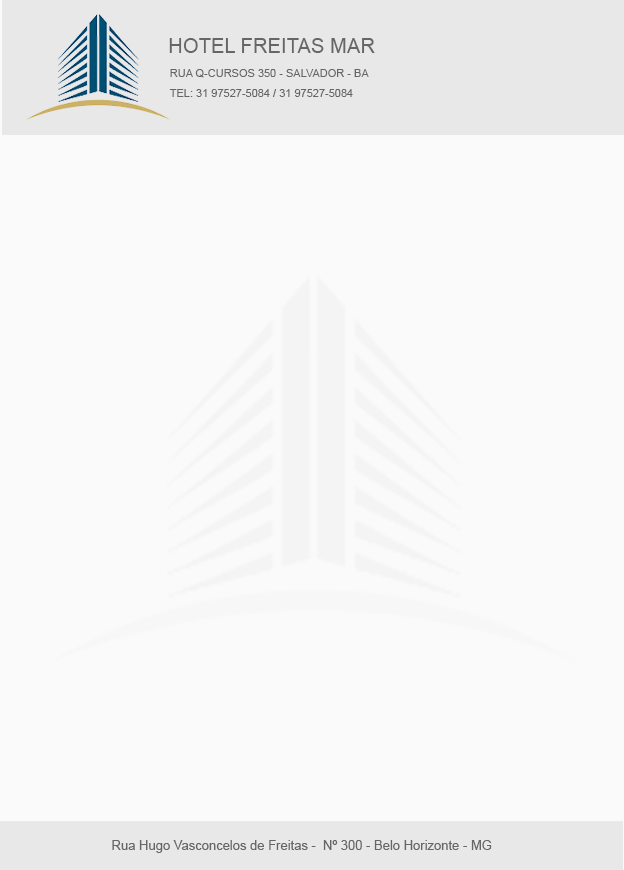
<style>
.page{position:relative;width:624px;height:870px;background:#fafafa}
.page>*{position:absolute;margin:0}
.t1{font:20.2px "ArialMT";color:#666666}
.t2{font:11px "ArialMT";color:#666666}
.t3{font:13px "ArialMT";color:#666666}
</style>
<div class="page">
<p class="t1" style="left:169px;top:38px;width:206px;height:15px">HOTEL FREITAS MAR</p>
<p class="t2" style="left:170px;top:69px;width:199px;height:9px">RUA Q-CURSOS 350 - SALVADOR - BA</p>
<p class="t2" style="left:169px;top:89px;width:184px;height:8px">TEL: 31 97527-5084 / 31 97527-5084</p>
<p class="t3" style="left:112px;top:840px;width:380px;height:13px">Rua Hugo Vasconcelos de Freitas -  Nº 300 - Belo Horizonte - MG</p>
</div>
